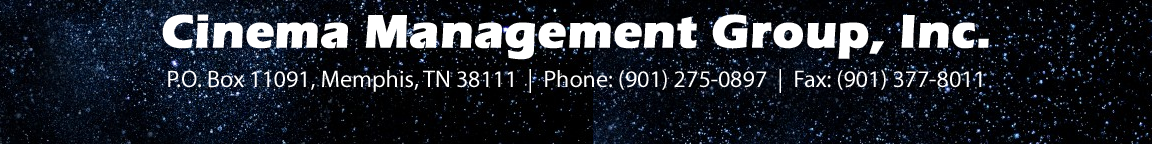
<style>
.page{position:relative;width:1152px;height:144px}
.page>*{position:absolute;margin:0}
.t1{font:24px "MyriadPro-Regular";color:#ffffff}
.t2{font:48px "ErasITC-Bold";color:#ffffff;font-weight:bold}
</style>
<div class="page">
<p class="t1" style="left:162px;top:14px;width:827px;height:79px;text-align:center"><span class="t2">Cinema Management Group, Inc.<br><br></span>P.O. Box 11091, Memphis, TN 38111  |  Phone: (901) 275-0897  |  Fax: (901) 377-8011</p>
</div>
